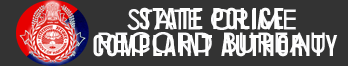
<style>
.page{position:relative;width:348px;height:66px;background:#333333}
.page>*{position:absolute;margin:0}
.t1{font:30px/27px "BebasNeue";letter-spacing:0.07em;color:#fefefe}
</style>
<div class="page">
<p class="t1" style="left:93px;top:7px;width:245px;height:50px;text-align:center">STATE POLICE <br>COMPLAINT AUTHORITY</p>
</div>
